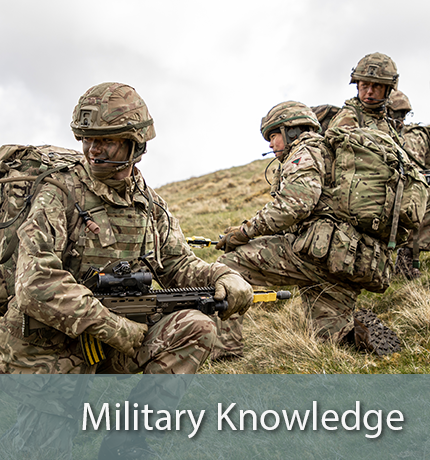
<style>
.page{position:relative;width:430px;height:460px}
.page>*{position:absolute;margin:0}
.t1{font:40px "MyriadPro-Regular";color:#f6f6f6}
</style>
<div class="page">
<p class="t1" style="left:82px;top:401px;width:322px;height:38px">Military Knowledge</p>
</div>
